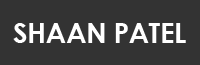
<style>
.page{position:relative;width:200px;height:65px;background:#333333}
.page>*{position:absolute;margin:0}
.t1{font:28px "CenturyGothic-Bold";letter-spacing:-0.02em;color:#ffffff;text-transform:uppercase}
.t2{font:28px "CenturyGothic-Bold";letter-spacing:-0.02em;color:#000000;text-transform:uppercase}
</style>
<div class="page">
<p class="t1" style="left:13px;top:23px;width:173px;height:20px">Shaan<span class="t2"> patel</span></p>
</div>
